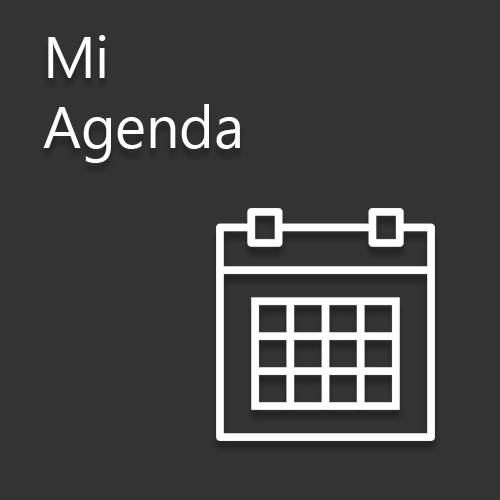
<style>
.page{position:relative;width:500px;height:500px;background:#333333}
.page>*{position:absolute;margin:0}
.t1{font:58.8px "SegoeUI";color:#ffffff}
</style>
<div class="page">
<p class="t1" style="left:43px;top:35px;width:197px;height:128px">Mi<br>Agenda</p>
</div>
